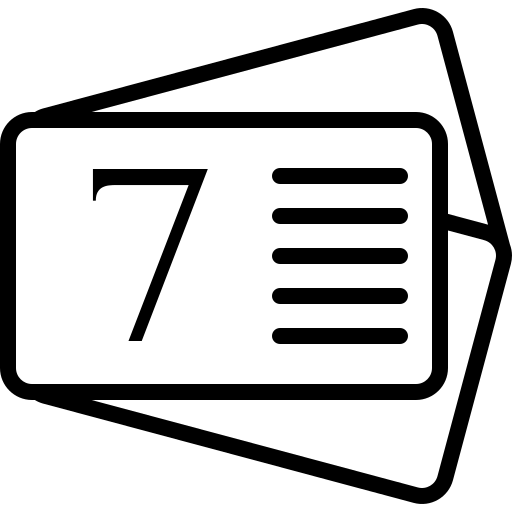
<style>
.page{position:relative;width:512px;height:512px;background:#ffffff}
.page>*{position:absolute;margin:0}
.t1{font:280px "Forum";color:#000000}
</style>
<div class="page">
<p class="t1" style="left:92px;top:169px;width:116px;height:172px">7</p>
</div>
